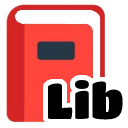
<style>
.page{position:relative;width:128px;height:128px;background:#ffffff}
.page>*{position:absolute;margin:0}
.t1{font:50px "TitanOne";color:#000000}
</style>
<div class="page">
<p class="t1" style="left:48px;top:80px;width:75px;height:40px">Lib</p>
</div>
